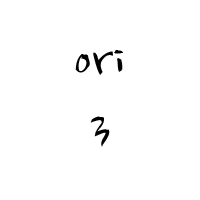
<style>
.page{position:relative;width:200px;height:200px;background:#ffffff}
.page>*{position:absolute;margin:0}
.t1{font:60px/72px "NanumBrush";color:#010000}
</style>
<div class="page">
<p class="t1" style="left:75px;top:50px;width:48px;height:97px;text-align:center">ori<br>3</p>
</div>
